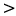
<style>
.page{position:relative;width:16px;height:16px;background:#ffffff}
.page>*{position:absolute;margin:0}
.t1{font:18px "Helvetica";color:#000000}
</style>
<div class="page">
<p class="t1" style="left:4px;top:3px;width:11px;height:10px">&gt;</p>
</div>
